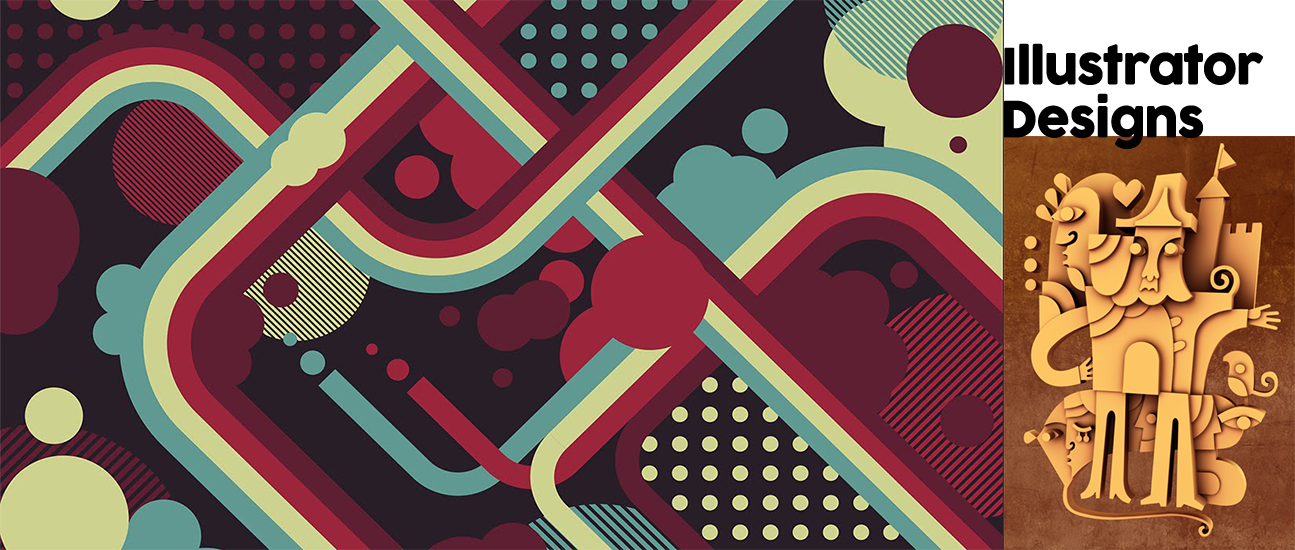
<style>
.page{position:relative;width:1295px;height:550px}
.page>*{position:absolute;margin:0}
.t1{font:48.7px "Cocogoose";letter-spacing:-0.05em;color:#000000;font-weight:bold}
</style>
<div class="page">
<p class="t1" style="left:1004px;top:43px;width:259px;height:107px">Illustrator<br>Designs</p>
</div>
